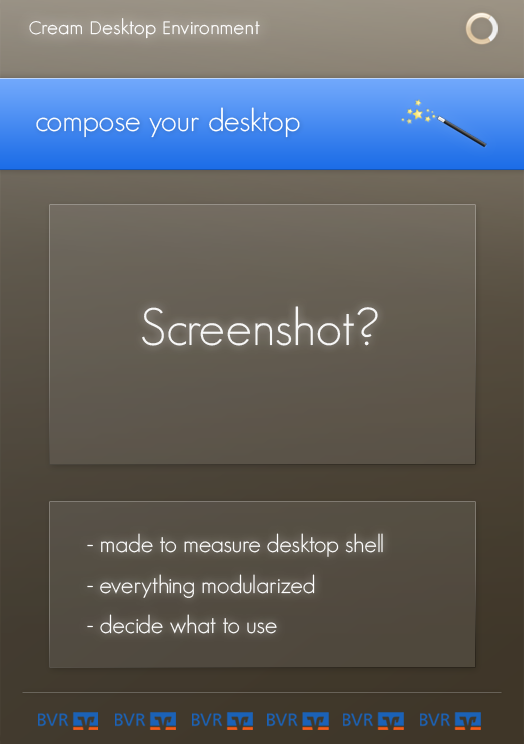
<style>
.page{position:relative;width:524px;height:744px}
.page>*{position:absolute;margin:0}
.t1{font:21.3px "GeosansLight";letter-spacing:0.025em;color:#ffffff}
.t2{font:17.4px "GeosansLight";letter-spacing:0.025em;color:#ffffff}
.t3{font:31.5px "GeosansLight";color:#ffffff}
.t4{font:52px "GeosansLight";color:#ffffff}
.t5{font:24.7px/40.6px "GeosansLight";color:#ffffff}
</style>
<div class="page">
<p class="t1" style="left:29px;top:18px;width:231px;height:21px"><span class="t2">C</span>ream <span class="t2">D</span>esktop <span class="t2">E</span>nvironment</p>
<p class="t3" style="left:36px;top:107px;width:264px;height:31px">compose your desktop</p>
<p class="t4" style="left:142px;top:306px;width:236px;height:40px">Screenshot?</p>
<p class="t5" style="left:87px;top:533px;width:296px;height:101px">- made to measure desktop shell<br>- everything modularized<br>- decide what to use</p>
</div>
